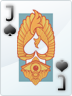
<style>
.page{position:relative;width:72px;height:96px}
.page>*{position:absolute;margin:0}
.t1{font:24px "Consolas";letter-spacing:0.01em;font-variant:small-caps;scale:0.9 1}
</style>
<div class="page">
<p class="t1" style="left:5px;top:5px;width:9px;height:17px">J</p>
<p class="t1" style="left:57px;top:74px;width:9px;height:17px">J</p>
</div>
